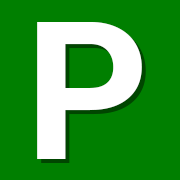
<style>
.page{position:relative;width:180px;height:180px;background:#007f00}
.page>*{position:absolute;margin:0}
.t1{font:192px "Roboto-Bold";color:#ffffff}
</style>
<div class="page">
<p class="t1" style="left:37px;top:22px;width:105px;height:137px">P</p>
</div>
